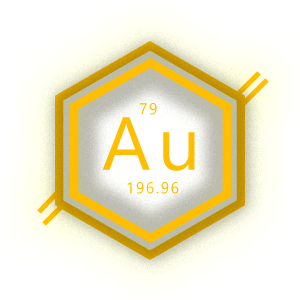
<style>
.page{position:relative;width:300px;height:300px;background:#ffffff}
.page>*{position:absolute;margin:0}
.t1{font:15.7px "SegoeUI";letter-spacing:0.1em;color:#ffc000}
.t2{font:75px "SegoeUI";letter-spacing:0.1em;color:#ffc000}
</style>
<div class="page">
<p class="t1" style="left:139px;top:103px;width:18px;height:12px">79</p>
<p class="t2" style="left:102px;top:117px;width:93px;height:54px">Au</p>
<p class="t1" style="left:127px;top:182px;width:52px;height:12px">196.96</p>
</div>
